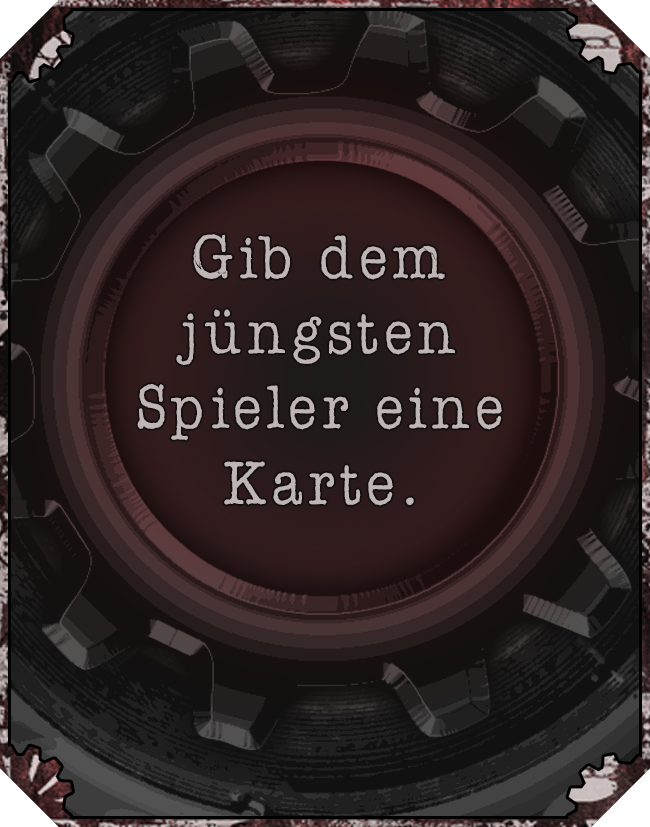
<style>
.page{position:relative;width:650px;height:827px}
.page>*{position:absolute;margin:0}
.t1{font:62.7px "AmerTypewriterITCbyBT-Medium";letter-spacing:0.02em;color:#c0b5b5}
</style>
<div class="page">
<p class="t1" style="left:137px;top:234px;width:365px;height:272px;text-align:center">Gib dem jüngsten Spieler eine Karte.</p>
</div>
